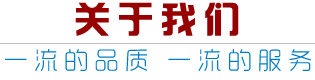
<style>
.page{position:relative;width:315px;height:80px;background:#ffffff}
.page>*{position:absolute;margin:0}
.t1{font:36px "hzgb";letter-spacing:0.2em;color:#960000;text-transform:uppercase}
.t2{font:24px "MFYueHei_Noncommercial-Light";letter-spacing:0.26em;color:#007cc2;text-transform:uppercase}
</style>
<div class="page">
<p class="t1" style="left:75px;top:2px;width:164px;height:34px">关于我们</p>
<p class="t2" style="left:5px;top:49px;width:306px;height:23px">一流的品质 一流的服务</p>
</div>
